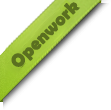
<style>
.page{position:relative;width:111px;height:110px;background:#ffffff}
.page>*{position:absolute;margin:0}
.t1{font:18px "BerlinSansFBDemi-Bold";color:#5b7020;font-weight:bold}
</style>
<div class="page">
<p class="t1" style="left:11px;top:2px;width:69px;height:65px;rotate:-45deg">Openwork</p>
</div>
